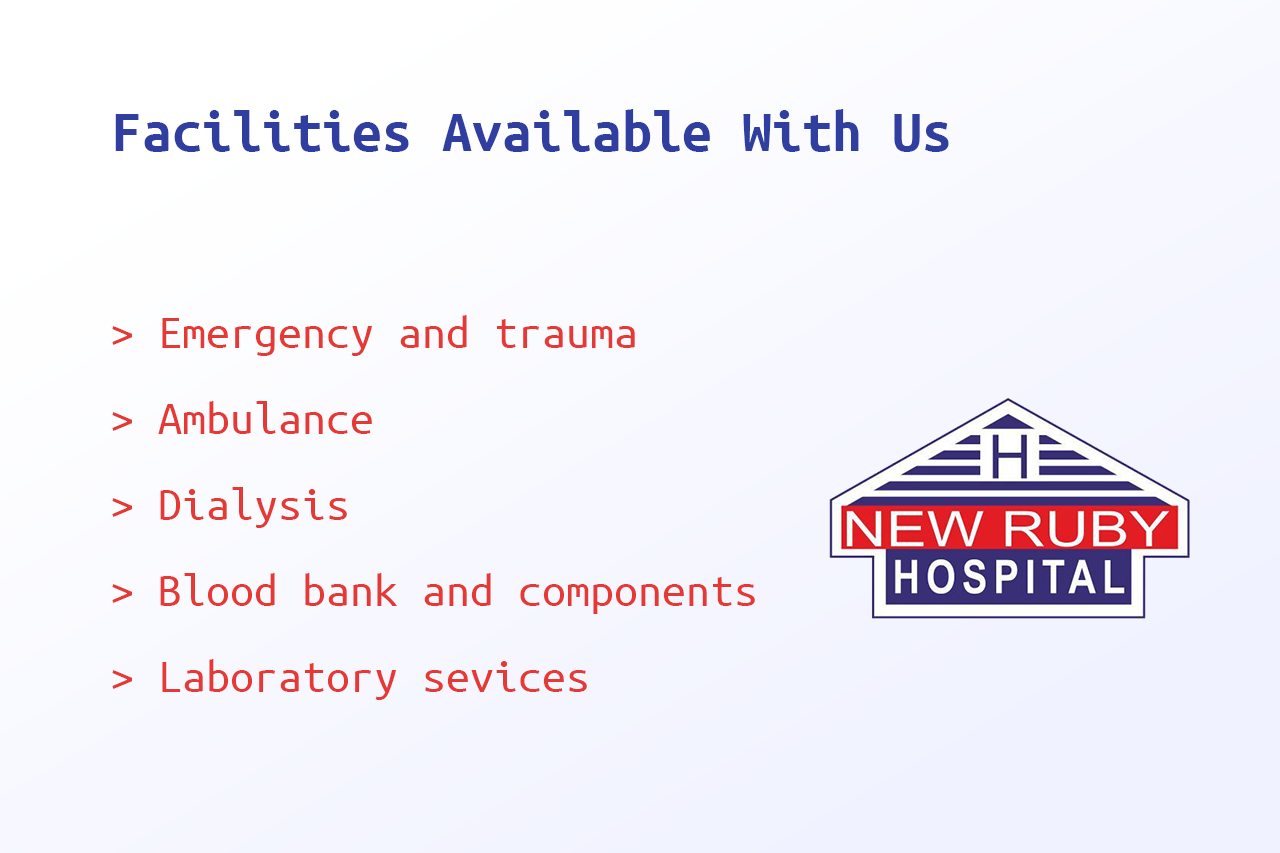
<style>
.page{position:relative;width:1280px;height:853px}
.page>*{position:absolute;margin:0}
.t1{font:60px "UbuntuMono-Bold";color:#303f9f}
.t2{font:48px/86px "UbuntuMono-Regular";color:#e53935}
</style>
<div class="page">
<p class="t1" style="left:115px;top:109px;width:834px;height:43px">Facilities Available With Us</p>
<p class="t2" style="left:112px;top:315px;width:643px;height:385px">&gt; Emergency and trauma <br>&gt; Ambulance <br>&gt; Dialysis<br>&gt; Blood bank and components <br>&gt; Laboratory sevices</p>
</div>
